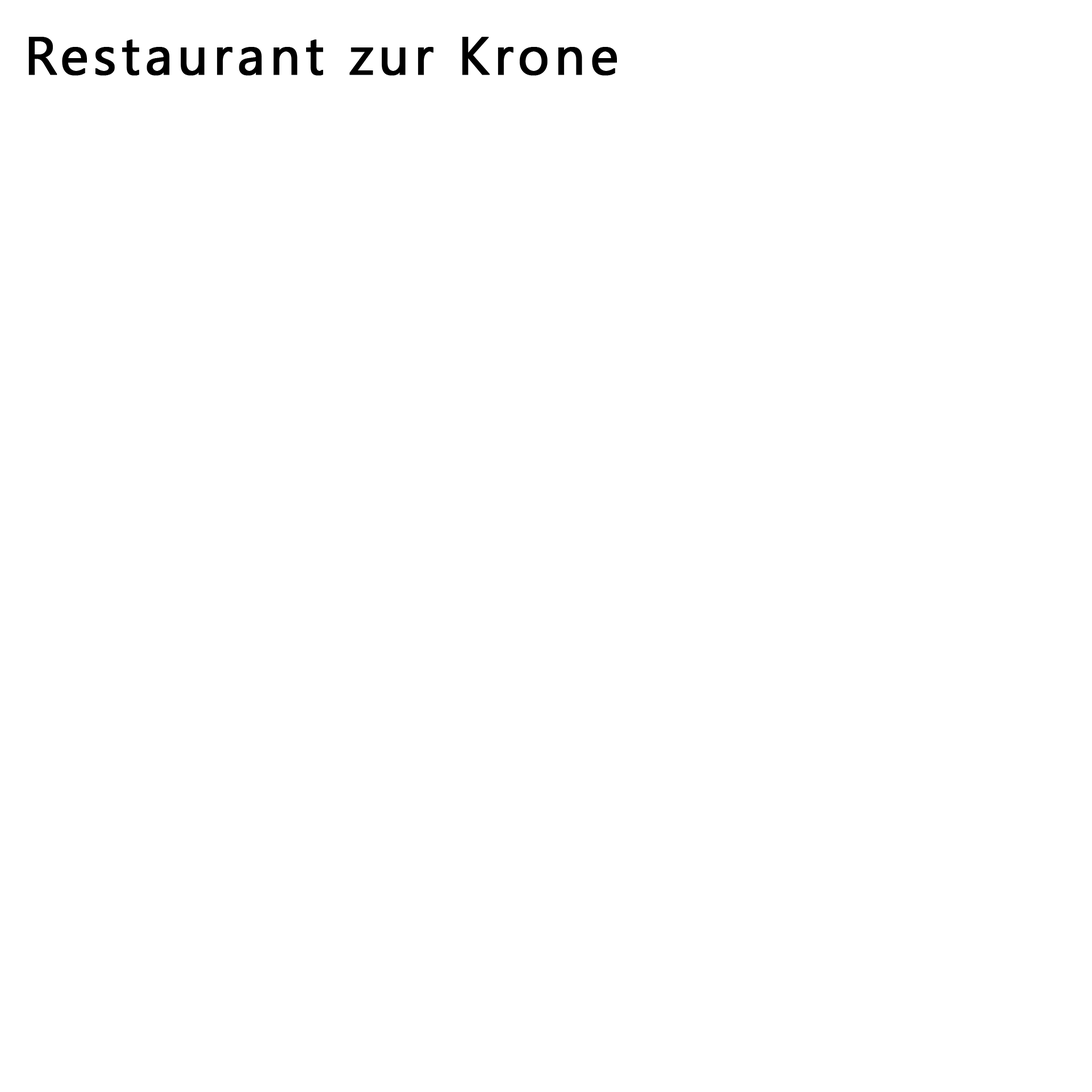
<style>
.page{position:relative;width:1092px;height:1092px;background:#ffffff}
.page>*{position:absolute;margin:0}
.t1{font:53.3px "Gadugi";letter-spacing:0.075em;color:#000000;font-weight:bold}
</style>
<div class="page">
<p class="t1" style="left:29px;top:37px;width:588px;height:39px">Restaurant zur Krone</p>
</div>
